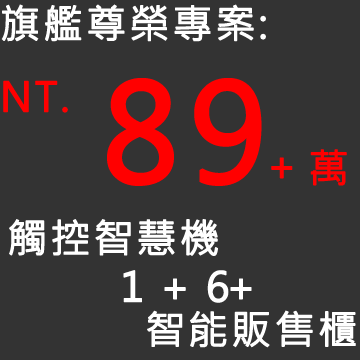
<style>
.page{position:relative;width:360px;height:360px;background:#333333}
.page>*{position:absolute;margin:0}
.t1{font:40px "MicrosoftJhengHeiRegular";letter-spacing:0.05em;color:#ffffff;font-weight:bold}
.t2{font:133.3px "MicrosoftJhengHeiRegular";letter-spacing:0.05em;color:#ff0000;font-weight:bold}
.t3{font:39.9px "MicrosoftJhengHeiRegular";letter-spacing:0.05em;color:#ff0000;font-weight:bold}
.t4{font:40px "MicrosoftJhengHeiRegular";letter-spacing:0.05em;color:#ff0000;font-weight:bold}
.t5{font:40px "MicrosoftJhengHeiRegular";letter-spacing:-0.11em;color:#ffffff;font-weight:bold}
.t6{font:39.7px "MicrosoftJhengHeiRegular";letter-spacing:0.05em;color:#ffffff;font-weight:bold}
</style>
<div class="page">
<p class="t1" style="left:1px;top:4px;width:265px;height:38px">旗艦尊榮專案:</p>
<p class="t2" style="left:107px;top:78px;width:155px;height:108px">89</p>
<p class="t3" style="left:3px;top:80px;width:65px;height:33px">NT.</p>
<p class="t4" style="left:310px;top:149px;width:37px;height:37px">萬</p>
<p class="t4" style="left:271px;top:157px;width:22px;height:22px">+</p>
<p class="t1" style="left:9px;top:219px;width:209px;height:37px">觸控智慧機</p>
<p class="t1" style="left:123px;top:270px;width:129px;height:33px">1 + <span class="t5">6+</span></p>
<p class="t6" style="left:147px;top:310px;width:209px;height:38px">智能販售櫃</p>
</div>
